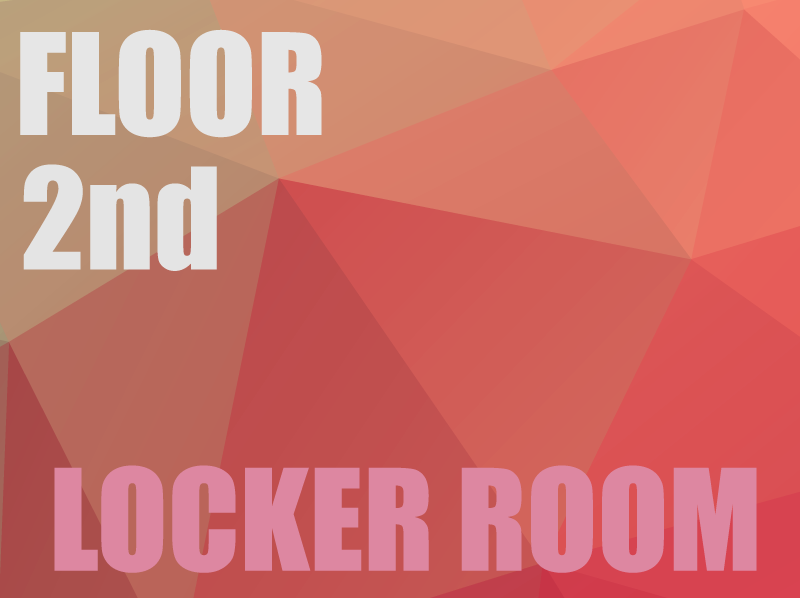
<style>
.page{position:relative;width:800px;height:598px}
.page>*{position:absolute;margin:0}
.t1{font:130px "Impact";color:#e6e6e6}
.t2{font:130px "Impact";color:#e4e4e4}
.t3{font:130px "Impact";color:#dd87a1}
</style>
<div class="page">
<p class="t1" style="left:20px;top:29px;width:302px;height:109px">FLOOR</p>
<p class="t2" style="left:23px;top:164px;width:194px;height:107px">2nd</p>
<p class="t3" style="left:54px;top:465px;width:703px;height:108px">LOCKER ROOM</p>
</div>
